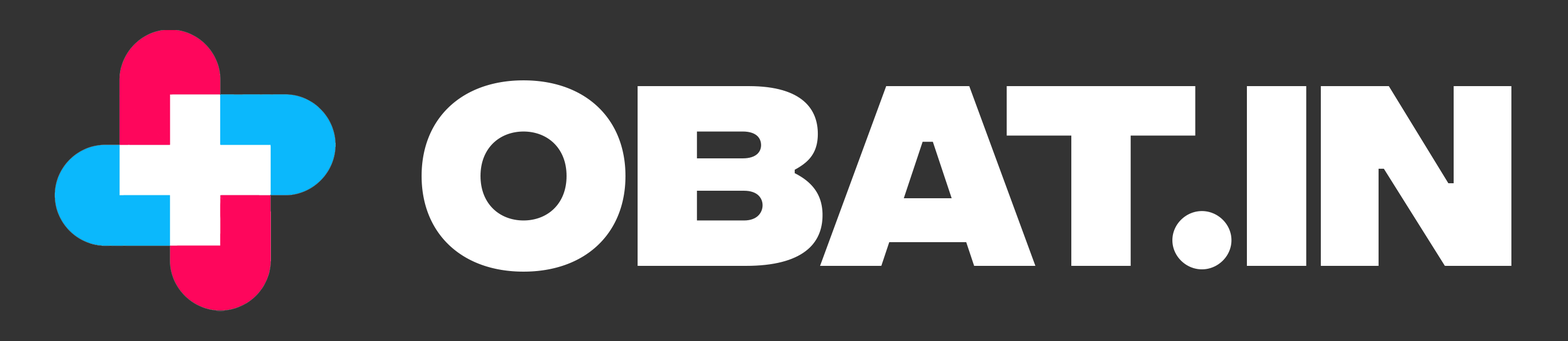
<style>
.page{position:relative;width:1568px;height:341px;background:#333333}
.page>*{position:absolute;margin:0}
.t1{font:256.8px "FONTSPRINGDEMO-IntegralCFBoldRegular";color:#ffffff}
</style>
<div class="page">
<p class="t1" style="left:422px;top:80px;width:1089px;height:191px">OBAT.IN</p>
</div>
